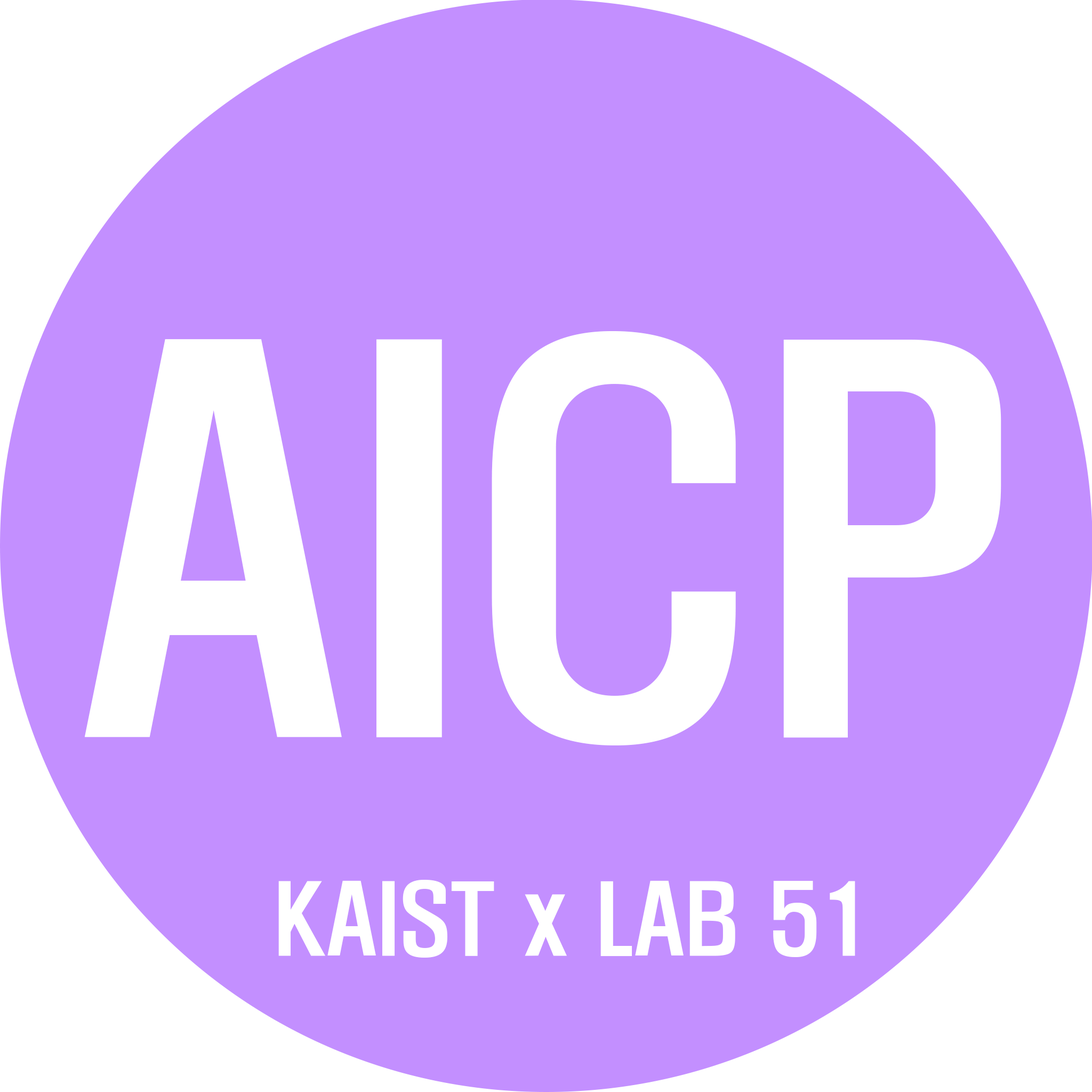
<style>
.page{position:relative;width:1092px;height:1092px;background:#c38fff}
.page>*{position:absolute;margin:0}
.t1{font:468.2px "H2hdrM";color:#ffffff}
.t2{font:87.8px "H2hdrM";color:#ffffff}
</style>
<div class="page">
<p class="t1" style="left:84px;top:331px;width:917px;height:414px">AICP</p>
<p class="t2" style="left:278px;top:880px;width:577px;height:78px">KAIST x LAB 51</p>
</div>
